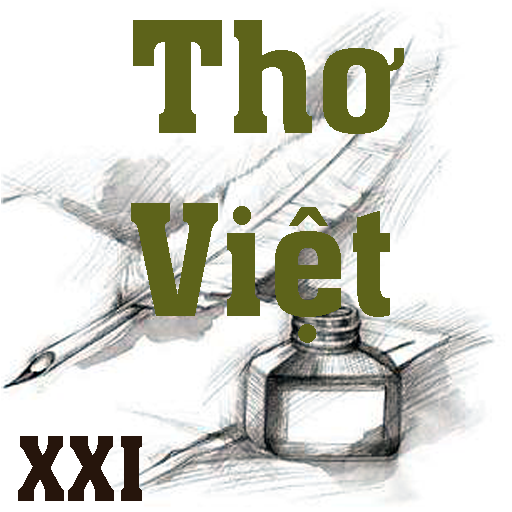
<style>
.page{position:relative;width:512px;height:512px;background:#ffffff}
.page>*{position:absolute;margin:0}
.t1{font:152.1px "Aachen-Bold";color:#5d631a}
.t2{font:86.9px "Aachen-Bold";color:#26150c}
</style>
<div class="page">
<p class="t1" style="left:131px;top:20px;width:273px;height:323px;text-align:center">Thơ<br>Việt</p>
<p class="t2" style="left:18px;top:436px;width:124px;height:65px">XXI</p>
</div>
